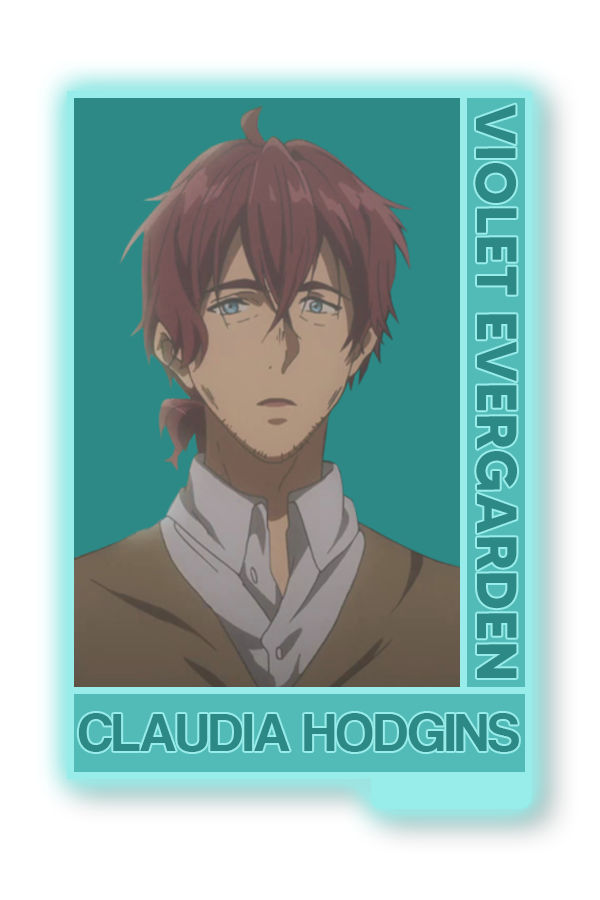
<style>
.page{position:relative;width:600px;height:900px;background:#ffffff}
.page>*{position:absolute;margin:0}
.t1{font:56.4px "MADETOMMY-Bold";color:#2c8986}
.t2{font:56.1px "CoolveticaRg-Regular";color:#2c8986}
</style>
<div class="page">
<p class="t1" style="left:475px;top:104px;width:43px;height:574px;rotate:90deg">VIOLET EVERGARDEN</p>
<p class="t2" style="left:78px;top:713px;width:441px;height:39px">CLAUDIA HODGINS</p>
</div>
